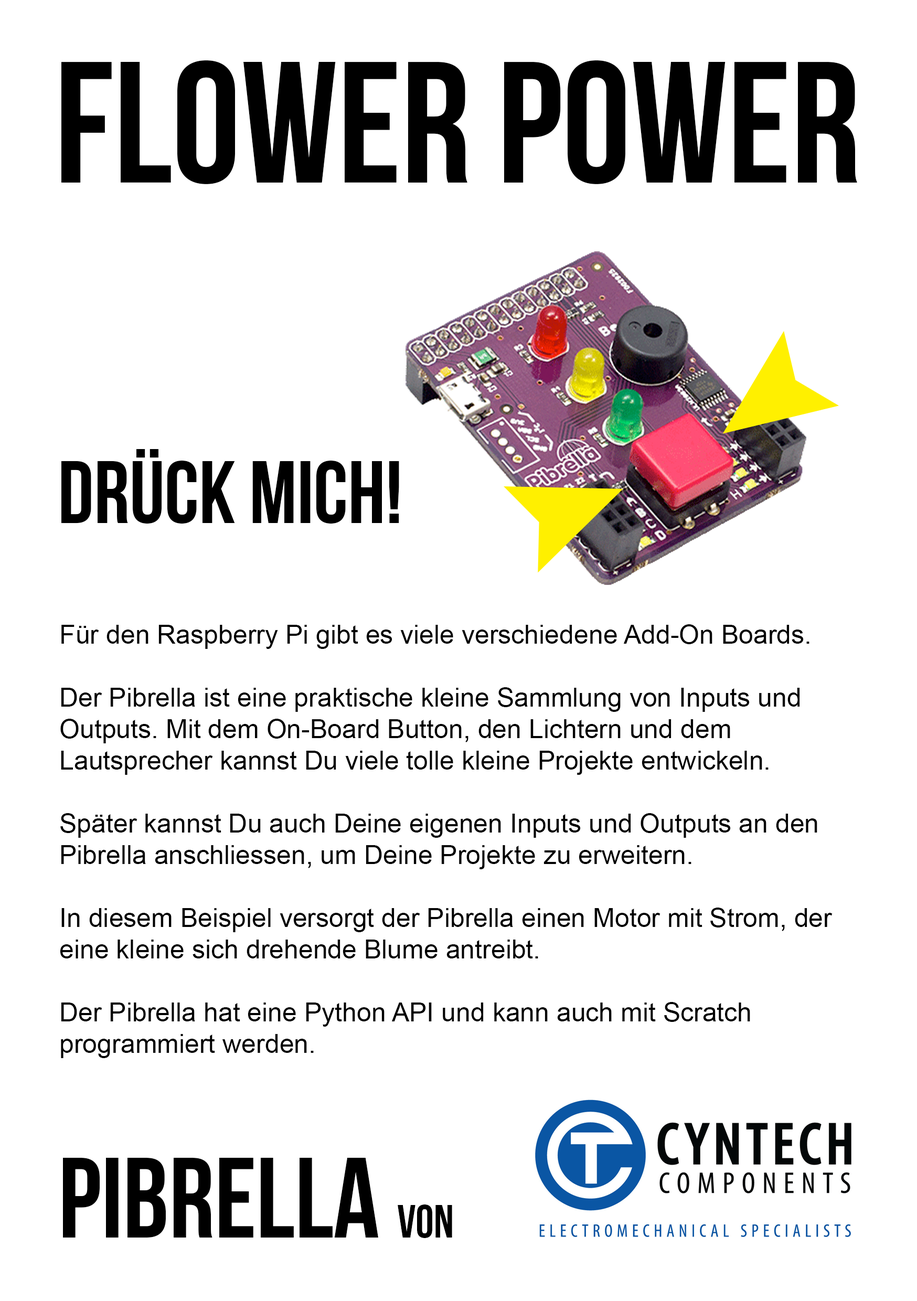
<style>
.page{position:relative;width:917px;height:1301px;background:#ffffff}
.page>*{position:absolute;margin:0}
.t1{font:172.3px "BebasNeue";color:#000000}
.t2{font:88.7px "BebasNeue";color:#000000}
.t3{font:26.2px "ArialMT";color:#000000}
.t4{font:114.2px "BebasNeue";color:#000000}
.t5{font:46.7px "BebasNeue";color:#000000}
</style>
<div class="page">
<p class="t1" style="left:61px;top:60px;width:796px;height:124px">FLOWER POWER</p>
<p class="t2" style="left:61px;top:449px;width:338px;height:75px">Drück mich!</p>
<p class="t3" style="left:60px;top:624px;width:772px;height:434px">Für den Raspberry Pi gibt es viele verschiedene Add-On Boards. <br><br>Der Pibrella ist eine praktische kleine Sammlung von Inputs und Outputs. Mit dem On-Board Button, den Lichtern und dem Lautsprecher kannst Du viele tolle kleine Projekte entwickeln. <br><br>Später kannst Du auch Deine eigenen Inputs und Outputs an den Pibrella anschliessen, um Deine Projekte zu erweitern.<br><br>In diesem Beispiel versorgt der Pibrella einen Motor mit Strom, der eine kleine sich drehende Blume antreibt.<br><br>Der Pibrella hat eine Python API und kann auch mit Scratch programmiert werden.</p>
<p class="t4" style="left:63px;top:1158px;width:389px;height:80px">Pibrella <span class="t5">von</span></p>
</div>
